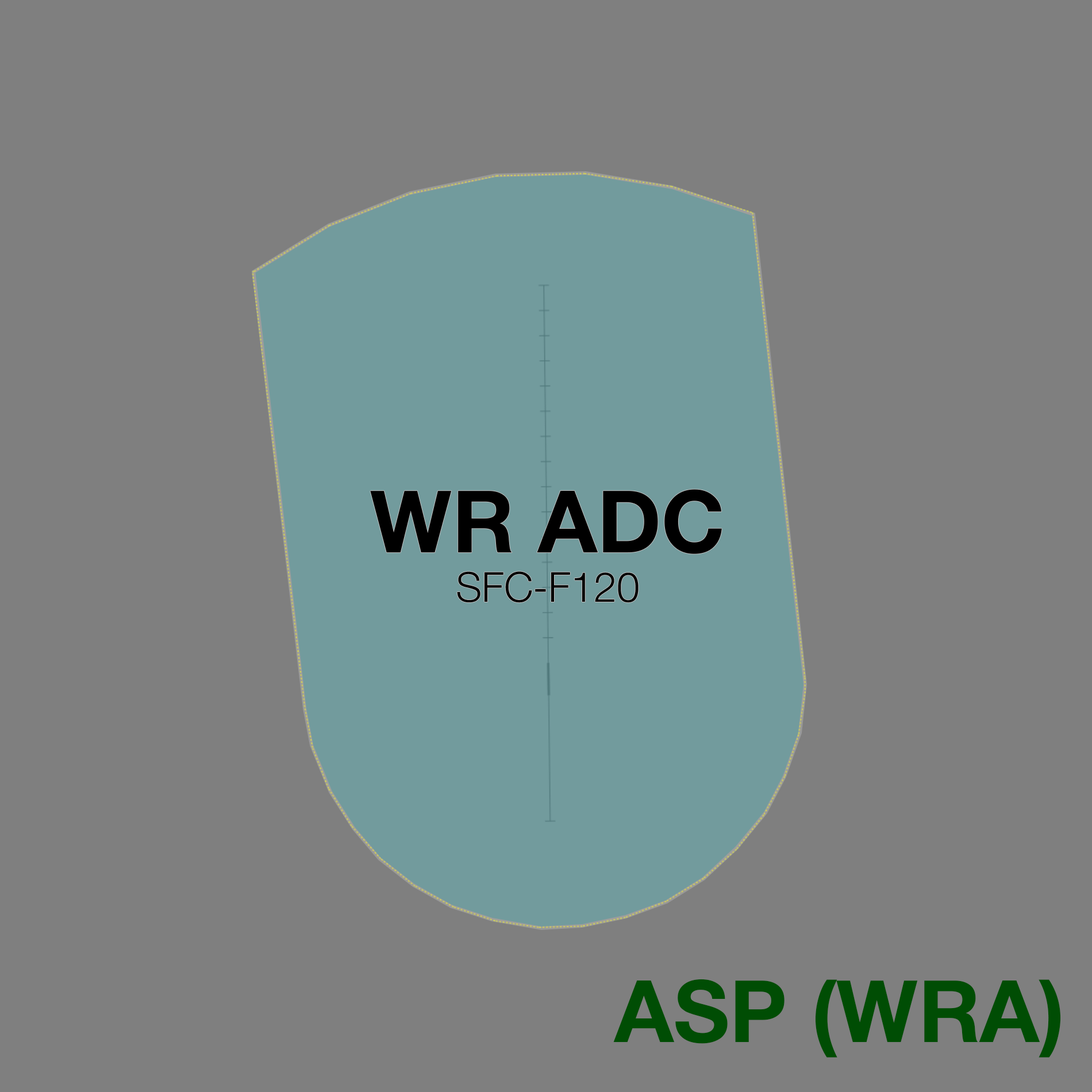
<style>
.page{position:relative;width:1092px;height:1092px;background:#7f7f7f}
.page>*{position:absolute;margin:0}
.t1{font:41.4px "HelveticaNeue-Light";color:#000000}
.t2{font:86.2px "HelveticaNeue-Bold";color:#000000}
.t3{font:86.2px "HelveticaNeue-Bold";color:#004d04}
</style>
<div class="page">
<p class="t1" style="left:370px;top:489px;width:352px;height:114px;text-align:center"><span class="t2">WR ADC<br></span>SFC-F120</p>
<p class="t3" style="left:613px;top:979px;width:448px;height:79px">ASP (WRA)</p>
</div>
